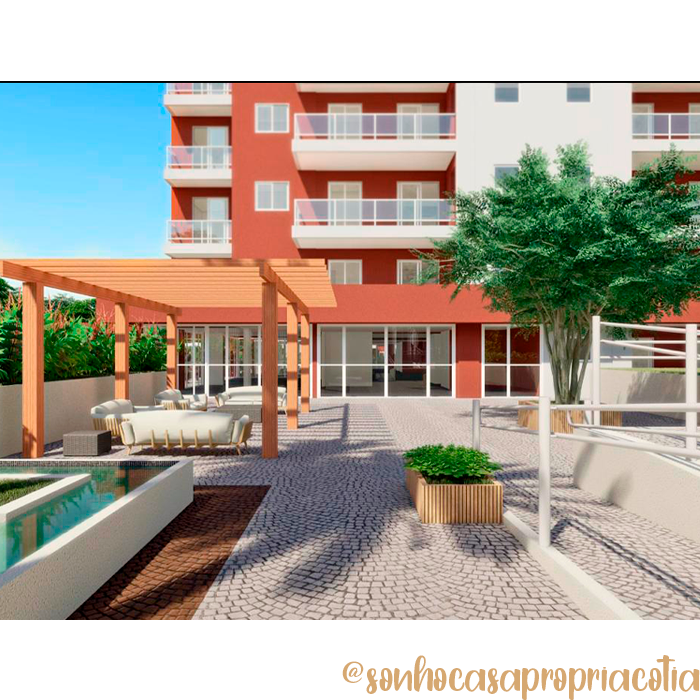
<style>
.page{position:relative;width:700px;height:700px;background:#ffffff}
.page>*{position:absolute;margin:0}
.t1{font:60px "YellowRabbit-PersonalUse";color:#d6a871}
</style>
<div class="page">
<p class="t1" style="left:342px;top:655px;width:358px;height:45px">@sonhocasapropriacotia</p>
</div>
